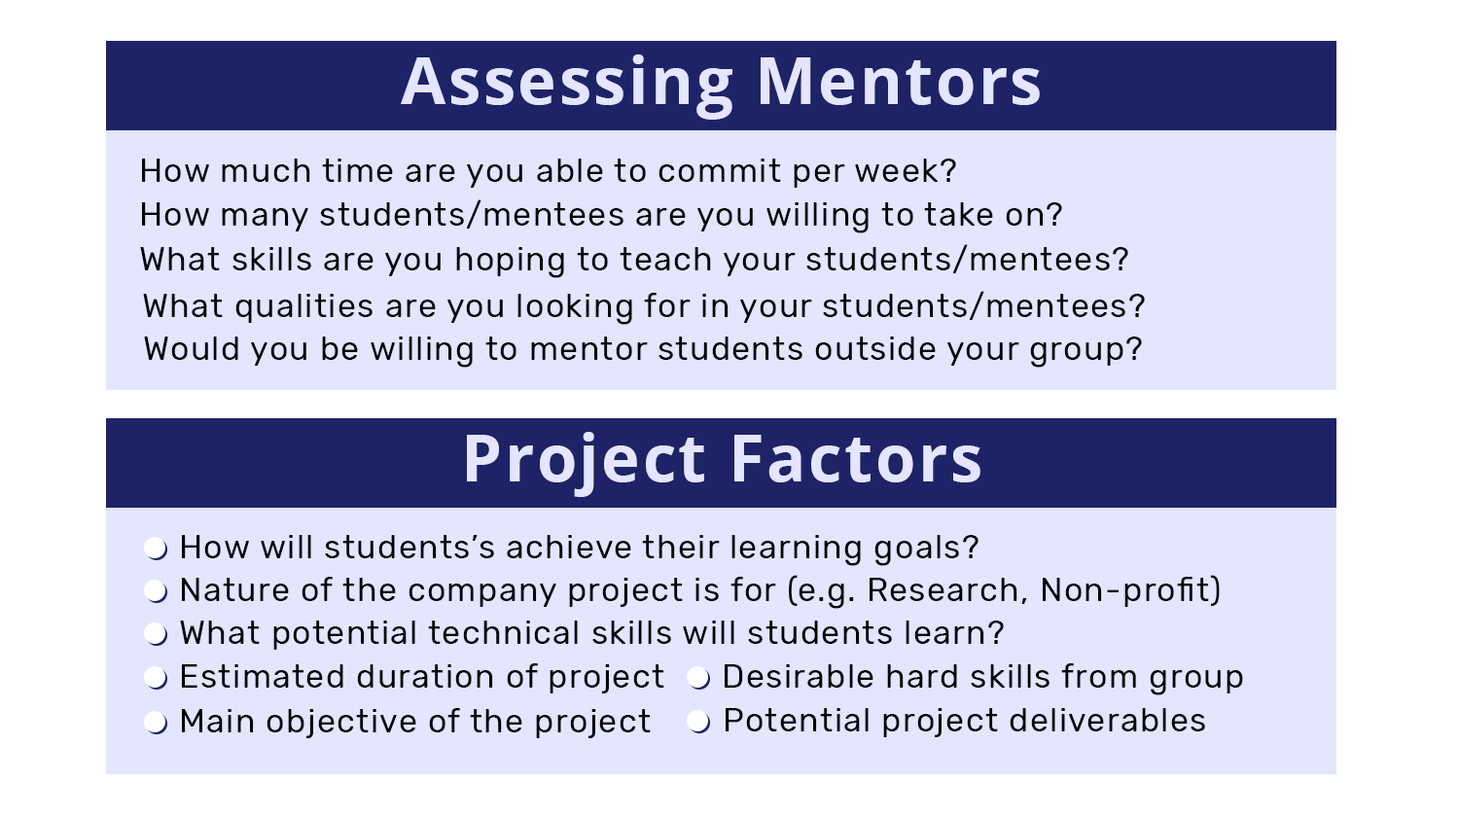
<style>
.page{position:relative;width:1459px;height:817px;background:#e4e5ff}
.page>*{position:absolute;margin:0}
.t1{font:64.9px "OpenSans-Bold";letter-spacing:0.04em;color:#e4e5ff}
.t2{font:33.1px "Rubik-Regular";letter-spacing:0.04em;color:#050505}
</style>
<div class="page">
<p class="t1" style="left:401px;top:54px;width:639px;height:66px">Assessing Mentors</p>
<p class="t2" style="left:142px;top:159px;width:814px;height:29px">How much time are you able to commit per week?</p>
<p class="t2" style="left:142px;top:199px;width:920px;height:34px">How many students/mentees are you willing to take on?</p>
<p class="t2" style="left:140px;top:244px;width:988px;height:34px">What skills are you hoping to teach your students/mentees?</p>
<p class="t2" style="left:143px;top:291px;width:1002px;height:34px">What qualities are you looking for in your students/mentees?</p>
<p class="t2" style="left:144px;top:337px;width:998px;height:31px">Would you be willing to mentor students outside your group?</p>
<p class="t1" style="left:467px;top:432px;width:514px;height:65px">Project Factors</p>
<p class="t2" style="left:182px;top:535px;width:797px;height:31px">How will students’s achieve their learning goals?</p>
<p class="t2" style="left:182px;top:575px;width:1038px;height:34px">Nature of the company project is for (e.g. Research, Non-profit)</p>
<p class="t2" style="left:180px;top:621px;width:824px;height:29px">What potential technical skills will students learn?</p>
<p class="t2" style="left:182px;top:663px;width:482px;height:31px">Estimated duration of project</p>
<p class="t2" style="left:725px;top:663px;width:518px;height:33px">Desirable hard skills from group</p>
<p class="t2" style="left:182px;top:708px;width:469px;height:30px">Main objective of the project</p>
<p class="t2" style="left:726px;top:708px;width:479px;height:29px">Potential project deliverables</p>
</div>
